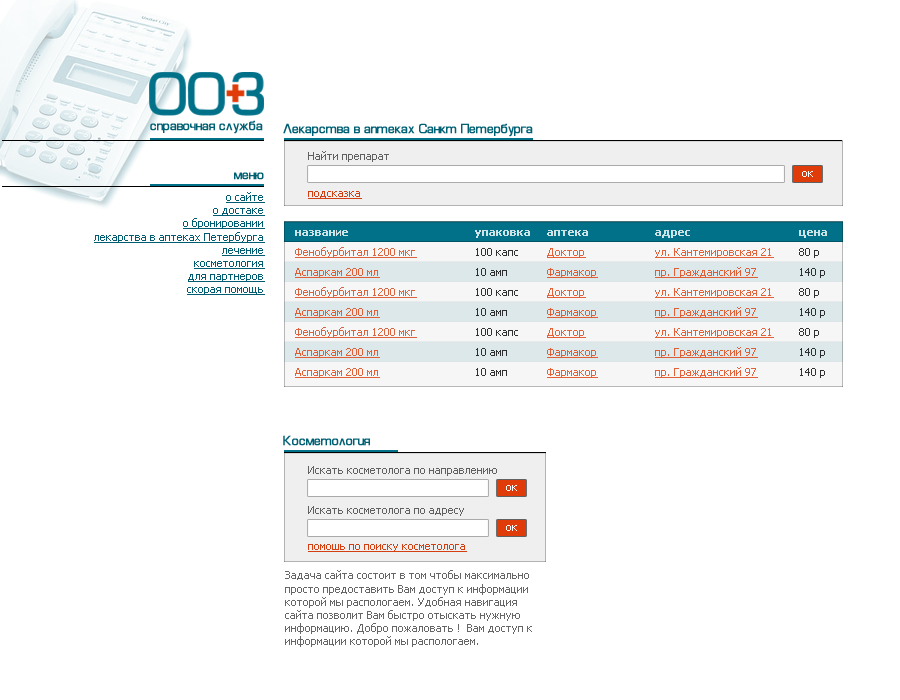
<style>
.page{position:relative;width:900px;height:700px;background:#ffffff}
.page>*{position:absolute;margin:0}
.t1{font:15px "EuroStyleNormal";color:#006074;font-weight:bold}
.t2{font:11px "Tahoma";color:#606060}
.t3{font:11px "Tahoma";color:#ffffff}
.t4{font:11px "Tahoma";color:#005c70;text-decoration:underline}
.t5{font:11px "Tahoma";color:#d43f11;text-decoration:underline}
.t6{font:11px/20px "Tahoma-Bold";color:#df6138}
.t7{font:11px/20px "Tahoma";color:#df6138;text-decoration:underline}
.t8{font:11px/20px "Tahoma";color:#df6138}
.t9{font:11px "Tahoma";color:#666666}
</style>
<div class="page">
<p class="t1" style="left:150px;top:120px;width:113px;height:14px">справочная служба</p>
<p class="t1" style="left:283px;top:123px;width:250px;height:14px">Лекарства в аптеках Санкт Петербурга</p>
<p class="t2" style="left:308px;top:151px;width:81px;height:11px">Найти препарат</p>
<p class="t1" style="left:234px;top:172px;width:30px;height:8px">меню</p>
<p class="t3" style="left:802px;top:171px;width:11px;height:6px">ок</p>
<p class="t4" style="left:94px;top:192px;width:171px;height:103px;text-align:right">о сайте<br>о достаке<br>о бронировании<br>лекарства в аптеках Петербурга<br>лечение<br>косметология<br>для партнеров<br>скорая помощь</p>
<p class="t5" style="left:308px;top:191px;width:54px;height:8px">подсказка</p>
<p class="t6" style="left:295px;top:230px;width:532px;height:148px">название    упаковка аптека  адрес   цена<br><span class="t7">Фенобурбитал 1200 мкг</span><span class="t8">  100 капс </span><span class="t7">Доктор  ул. Кантемировская 21</span><span class="t8"> 80 р<br></span><span class="t7">Аспаркам 200 мл</span><span class="t8">   10 амп  </span><span class="t7">Фармакор  пр. Гражданский 97</span><span class="t8">  140 р<br></span><span class="t7">Фенобурбитал 1200 мкг</span><span class="t8">  100 капс </span><span class="t7">Доктор  ул. Кантемировская 21</span><span class="t8"> 80 р<br></span><span class="t7">Аспаркам 200 мл</span><span class="t8">   10 амп  </span><span class="t7">Фармакор  пр. Гражданский 97</span><span class="t8">  140 р<br></span><span class="t7">Фенобурбитал 1200 мкг</span><span class="t8">  100 капс </span><span class="t7">Доктор  ул. Кантемировская 21</span><span class="t8"> 80 р<br></span><span class="t7">Аспаркам 200 мл</span><span class="t8">   10 амп  </span><span class="t7">Фармакор  пр. Гражданский 97</span><span class="t8">  140 р<br></span><span class="t7">Аспаркам 200 мл</span><span class="t8">   10 амп  </span><span class="t7">Фармакор  пр. Гражданский 97</span><span class="t8">  140 р</span></p>
<p class="t1" style="left:283px;top:435px;width:87px;height:11px">Косметология</p>
<p class="t2" style="left:308px;top:466px;width:189px;height:50px">Искать косметолога по направлению<br><br><br>Искать косметолога по адресу</p>
<p class="t5" style="left:308px;top:544px;width:159px;height:8px">помошь по поиску косметолога</p>
<p class="t9" style="left:285px;top:570px;width:247px;height:77px">Задача сайта состоит в том чтобы максимально просто предоставить Вам доступ к информации которой мы распологаем. Удобная навигация сайта позволит Вам быстро отыскать нужную информацию. Добро пожаловать !  Вам доступ к информации которой мы распологаем.</p>
</div>
